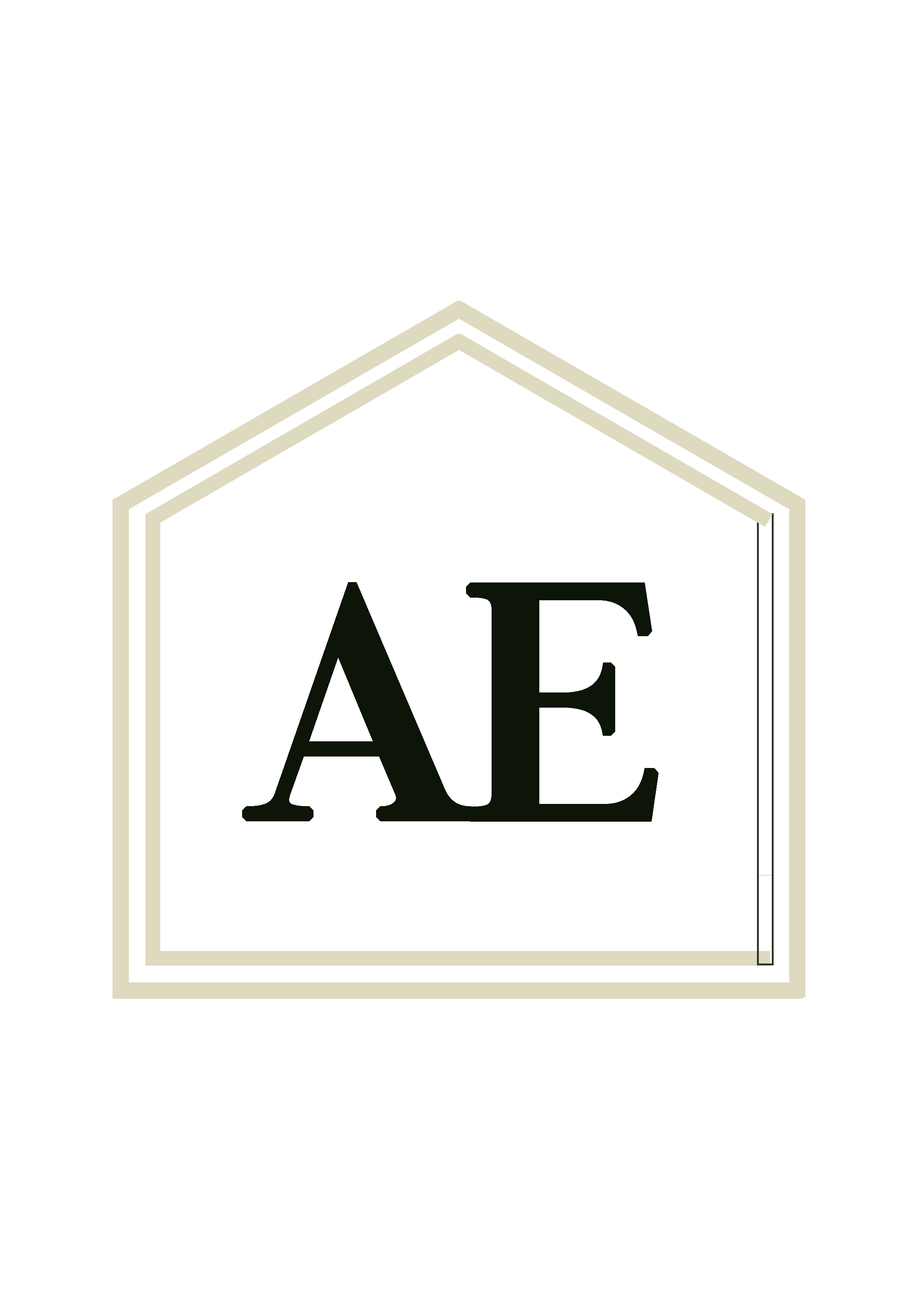
<style>
.page{position:relative;width:918px;height:1299px;background:#ffffff}
.page>*{position:absolute;margin:0}
.t1{font:308.5px "AbigailNagita";letter-spacing:-0.05em;color:#0d1408;font-weight:bold}
</style>
<div class="page">
<p class="t1" style="left:242px;top:582px;width:417px;height:240px">AE</p>
</div>
